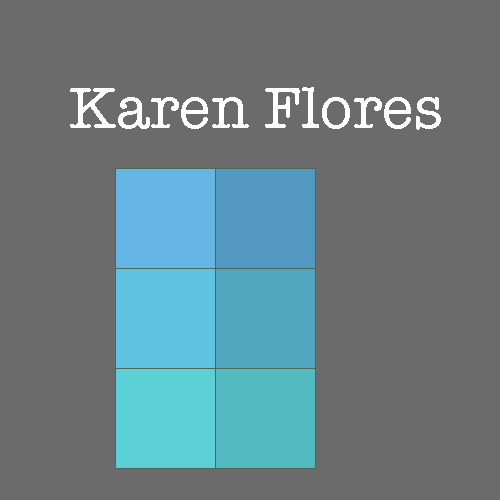
<style>
.page{position:relative;width:500px;height:500px;background:#6b6b6b}
.page>*{position:absolute;margin:0}
.t1{font:60px "AmericanTypewriter";color:#ffffff}
</style>
<div class="page">
<p class="t1" style="left:70px;top:87px;width:371px;height:43px">Karen Flores</p>
</div>
